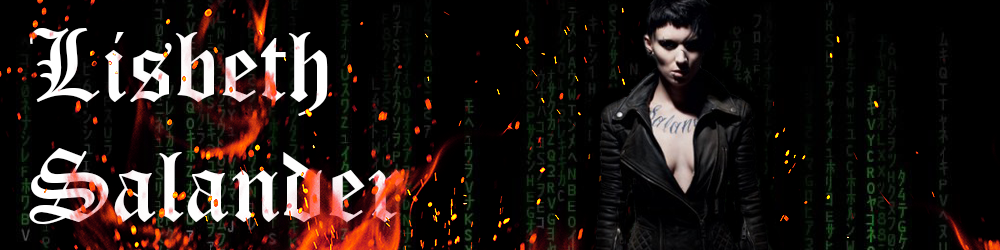
<style>
.page{position:relative;width:1000px;height:250px;background:#000000}
.page>*{position:absolute;margin:0}
.t1{font:100px "OldEnglishTextMT";color:#ffffff}
</style>
<div class="page">
<p class="t1" style="left:29px;top:28px;width:375px;height:196px">Lisbeth<br>Salander</p>
</div>
